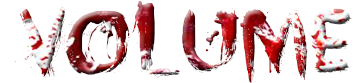
<style>
.page{position:relative;width:353px;height:83px;background:#ffffff}
.page>*{position:absolute;margin:0}
.t1{font:120px "DKFaceYourFears"}
</style>
<div class="page">
<p class="t1" style="left:14px;top:1px;width:338px;height:83px">Volume</p>
</div>
